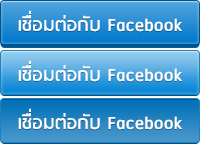
<style>
.page{position:relative;width:200px;height:144px}
.page>*{position:absolute;margin:0}
.t1{font:22px "RSU-Bold";color:#ffffff}
</style>
<div class="page">
<p class="t1" style="left:18px;top:10px;width:164px;height:22px">เชื่อมต่อกับ Facebook</p>
<p class="t1" style="left:18px;top:60px;width:164px;height:22px">เชื่อมต่อกับ Facebook</p>
<p class="t1" style="left:18px;top:108px;width:164px;height:22px">เชื่อมต่อกับ Facebook</p>
</div>
